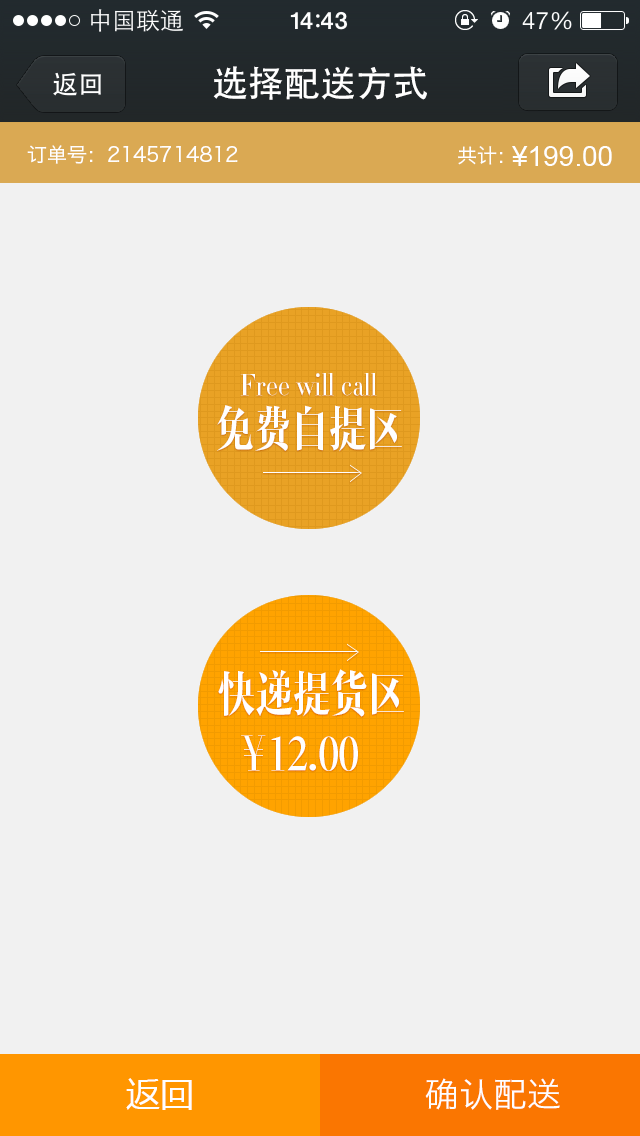
<style>
.page{position:relative;width:640px;height:1136px;background:#f1f1f1}
.page>*{position:absolute;margin:0}
.t1{font:36px "AdobeHeitiStd-Regular";color:#ffffff}
.t2{font:20px "HiraginoSansGB-W3";color:#ffffff}
.t3{font:28px "ArialMT";color:#ffffff}
.t4{font:30px "RTWSJyunYaG0v1-Regular";color:#ffffff}
.t5{font:50px "RTWSJyunYaG0v1-Regular";color:#ffffff}
.t6{font:34px "MicrosoftYaHei";color:#fefefe}
.t7{font:34px "HiraginoSansGB-W3";color:#fefefe}
</style>
<div class="page">
<p class="t1" style="left:213px;top:66px;width:214px;height:34px">选择配送方式</p>
<p class="t2" style="left:27px;top:145px;width:211px;height:19px">订单号：2145714812</p>
<p class="t2" style="left:458px;top:146px;width:45px;height:19px">共计：</p>
<p class="t3" style="left:512px;top:146px;width:100px;height:20px">¥199.00</p>
<p class="t4" style="left:240px;top:373px;width:137px;height:23px">Free will call</p>
<p class="t5" style="left:217px;top:405px;width:185px;height:47px">免费自提区</p>
<p class="t5" style="left:218px;top:669px;width:186px;height:48px">快递提货区</p>
<p class="t5" style="left:241px;top:735px;width:117px;height:36px">￥12.00</p>
<p class="t6" style="left:126px;top:1078px;width:66px;height:32px">返回</p>
<p class="t7" style="left:425px;top:1078px;width:135px;height:32px">确认配送</p>
</div>
